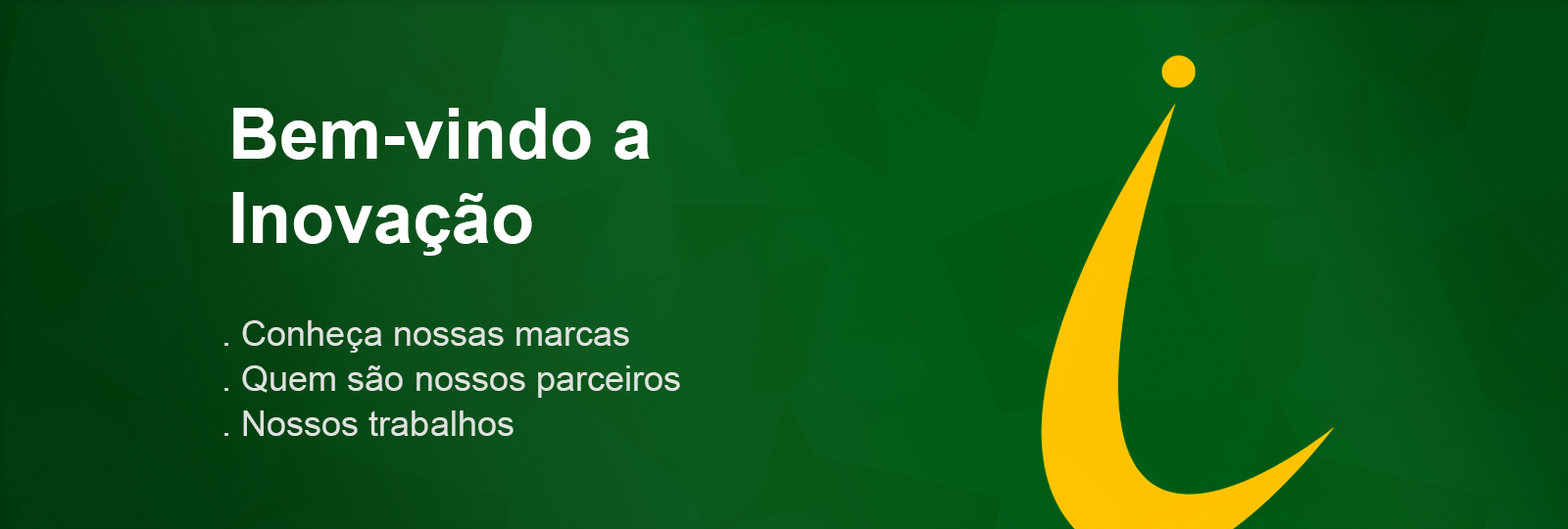
<style>
.page{position:relative;width:1568px;height:529px}
.page>*{position:absolute;margin:0}
.t1{font:70.6px "Arial-BoldMT";color:#ffffff}
.t2{font:35.3px/45.1px "ArialMT";color:#dee3df}
</style>
<div class="page">
<p class="t1" style="left:233px;top:108px;width:417px;height:52px">Bem-vindo a</p>
<p class="t1" style="left:232px;top:192px;width:300px;height:64px">Inovação</p>
<p class="t2" style="left:224px;top:320px;width:456px;height:116px">. Conheça nossas marcas<br>. Quem são nossos parceiros<br>. Nossos trabalhos</p>
</div>
